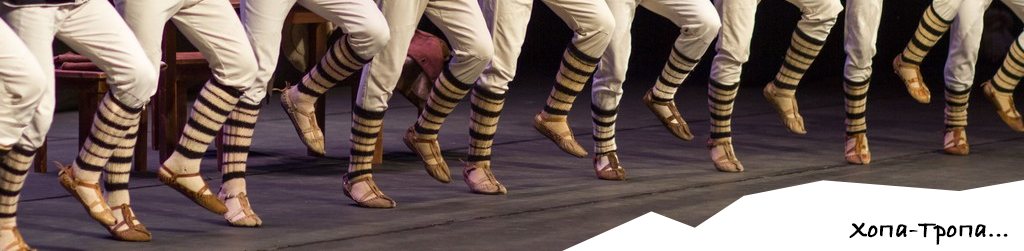
<style>
.page{position:relative;width:1024px;height:251px}
.page>*{position:absolute;margin:0}
.t1{font:25px "BradleyHandITCTT-Bold";color:#000000;font-weight:bold}
</style>
<div class="page">
<p class="t1" style="left:849px;top:222px;width:159px;height:23px">Хопа-Тропа...</p>
</div>
